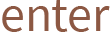
<style>
.page{position:relative;width:112px;height:33px;background:#ffffff}
.page>*{position:absolute;margin:0}
.t1{font:50px "SourceSansPro-Regular";letter-spacing:-0.01em;color:#8c5843}
</style>
<div class="page">
<p class="t1" style="left:2px;top:0px;width:108px;height:32px">enter</p>
</div>
